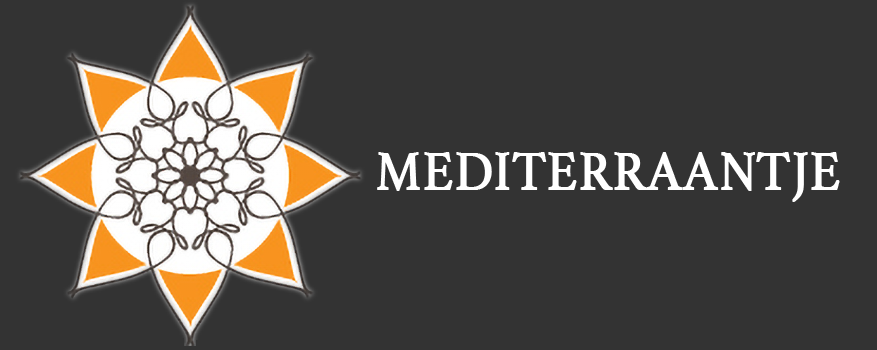
<style>
.page{position:relative;width:877px;height:350px;background:#333333}
.page>*{position:absolute;margin:0}
.t1{font:55.7px "Athelas-Regular";color:#ffffff;text-transform:uppercase;font-weight:bold;scale:0.91 1}
</style>
<div class="page">
<p class="t1" style="left:377px;top:152px;width:463px;height:50px">MEDITERRAANTJE</p>
</div>
